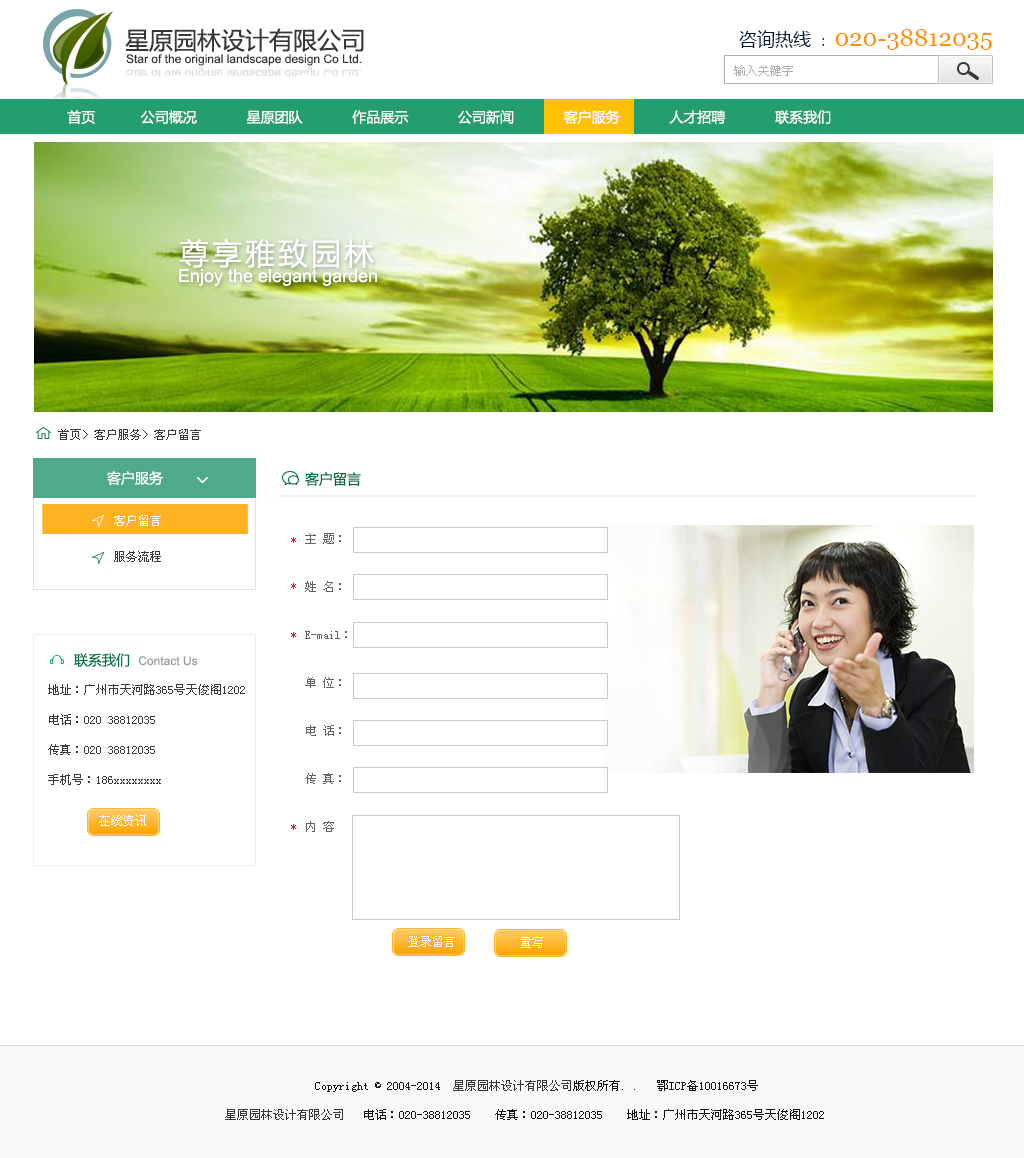
<style>
.page{position:relative;width:1024px;height:1158px;background:#ffffff}
.page>*{position:absolute;margin:0}
.t1{font:24px "MicrosoftYaHei";color:#373737}
.t2{font:24px "Georgia";color:#ff9000}
.t3{font:18px "MicrosoftYaHei";color:#001937}
.t4{font:14px "MicrosoftYaHei";color:#001937}
.t5{font:12px "ArialMT";color:#373737}
.t6{font:12px "SimSun";color:#b1b1b0}
.t7{font:11.8px "ArialMT";color:#dcdcdc}
.t8{font:14px "MicrosoftYaHei";color:#ffffff}
.t9{font:30px "MicrosoftYaHei";letter-spacing:0.1em;color:#ffffff}
.t10{font:18px "ArialMT";color:#ffffff}
.t11{font:12px "SimSun";color:#3a3a3a}
.t12{font:14px "MicrosoftYaHei";color:#006d44}
.t13{font:12px/36px "SimSun";color:#ffffff}
.t14{font:12px/36px "SimSun";color:#3a3a3a}
.t15{font:12px/48px "SimSun";color:#646464}
.t16{font:12px "SimSun";color:#f40b1b}
.t17{font:12px "ArialMT";color:#9c9c9c}
.t18{font:14px "MicrosoftYaHei";color:#007245}
.t19{font:12px/30px "SimSun";color:#3a3a3a}
.t20{font:12px "SimSun";color:#ffffff}
.t21{font:12px "SimSun";color:#131313}
.t22{font:12px "SimSun";color:#373737}
</style>
<div class="page">
<p class="t1" style="left:125px;top:28px;width:239px;height:24px">星原园林设计有限公司</p>
<p class="t2" style="left:739px;top:29px;width:253px;height:21px"><span class="t3">咨询热线 </span><span class="t4">： </span>020-38812035</p>
<p class="t5" style="left:126px;top:54px;width:236px;height:12px">Star of the original landscape design Co Ltd.</p>
<p class="t6" style="left:734px;top:65px;width:59px;height:11px">输入关键字</p>
<p class="t7" style="left:126px;top:67px;width:235px;height:12px">Star of the original landscape design Co Ltd.</p>
<p class="t8" style="left:67px;top:110px;width:764px;height:14px">首页           公司概况            星原团队            作品展示            公司新闻            客户服务            人才招聘            联系我们</p>
<p class="t9" style="left:179px;top:238px;width:195px;height:31px">尊享雅致园林</p>
<p class="t10" style="left:179px;top:269px;width:198px;height:17px">Enjoy the elegant garden</p>
<p class="t11" style="left:58px;top:429px;width:143px;height:11px">首页&gt; 客户服务&gt; 客户留言</p>
<p class="t8" style="left:107px;top:471px;width:56px;height:14px">客户服务</p>
<p class="t12" style="left:305px;top:472px;width:56px;height:14px">客户留言</p>
<p class="t13" style="left:114px;top:515px;width:47px;height:47px;text-align:justify">客户留言<br><span class="t14">服务流程</span></p>
<p class="t15" style="left:305px;top:533px;width:42px;height:299px;text-align:justify">主 题：<br>姓 名：<br>E-mail：<br>单 位：<br>电 话：<br>传 真：<br>内 容</p>
<p class="t16" style="left:291px;top:537px;width:5px;height:6px">*</p>
<p class="t16" style="left:291px;top:583px;width:5px;height:6px">*</p>
<p class="t16" style="left:291px;top:632px;width:5px;height:6px">*</p>
<p class="t17" style="left:74px;top:653px;width:124px;height:14px"><span class="t18">联系我们  </span>Contact Us</p>
<p class="t19" style="left:48px;top:684px;width:197px;height:101px;text-align:justify">地址：广州市天河路365号天俊阁1202<br>电话：020 38812035<br>传真：020 38812035<br>手机号：186xxxxxxxx</p>
<p class="t20" style="left:99px;top:815px;width:47px;height:11px">在线资讯</p>
<p class="t16" style="left:291px;top:824px;width:5px;height:6px">*</p>
<p class="t20" style="left:408px;top:936px;width:47px;height:11px">登录留言</p>
<p class="t20" style="left:520px;top:937px;width:23px;height:11px">重写</p>
<p class="t21" style="left:315px;top:1080px;width:443px;height:12px">Copyright © 2004-2014  <span class="t22">星原园林设计有限公司</span>版权所有. .   鄂ICP备10016673号</p>
<p class="t21" style="left:225px;top:1109px;width:599px;height:11px"><span class="t22">星原园林设计有限公司</span>   电话：020-38812035    传真：020-38812035    地址：广州市天河路365号天俊阁1202</p>
</div>
